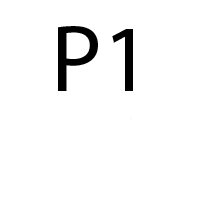
<style>
.page{position:relative;width:202px;height:202px;background:#ffffff}
.page>*{position:absolute;margin:0}
.t1{font:96px "MyriadHebrew-Regular";color:#000000}
</style>
<div class="page">
<p class="t1" style="left:58px;top:26px;width:75px;height:65px">P1</p>
</div>
